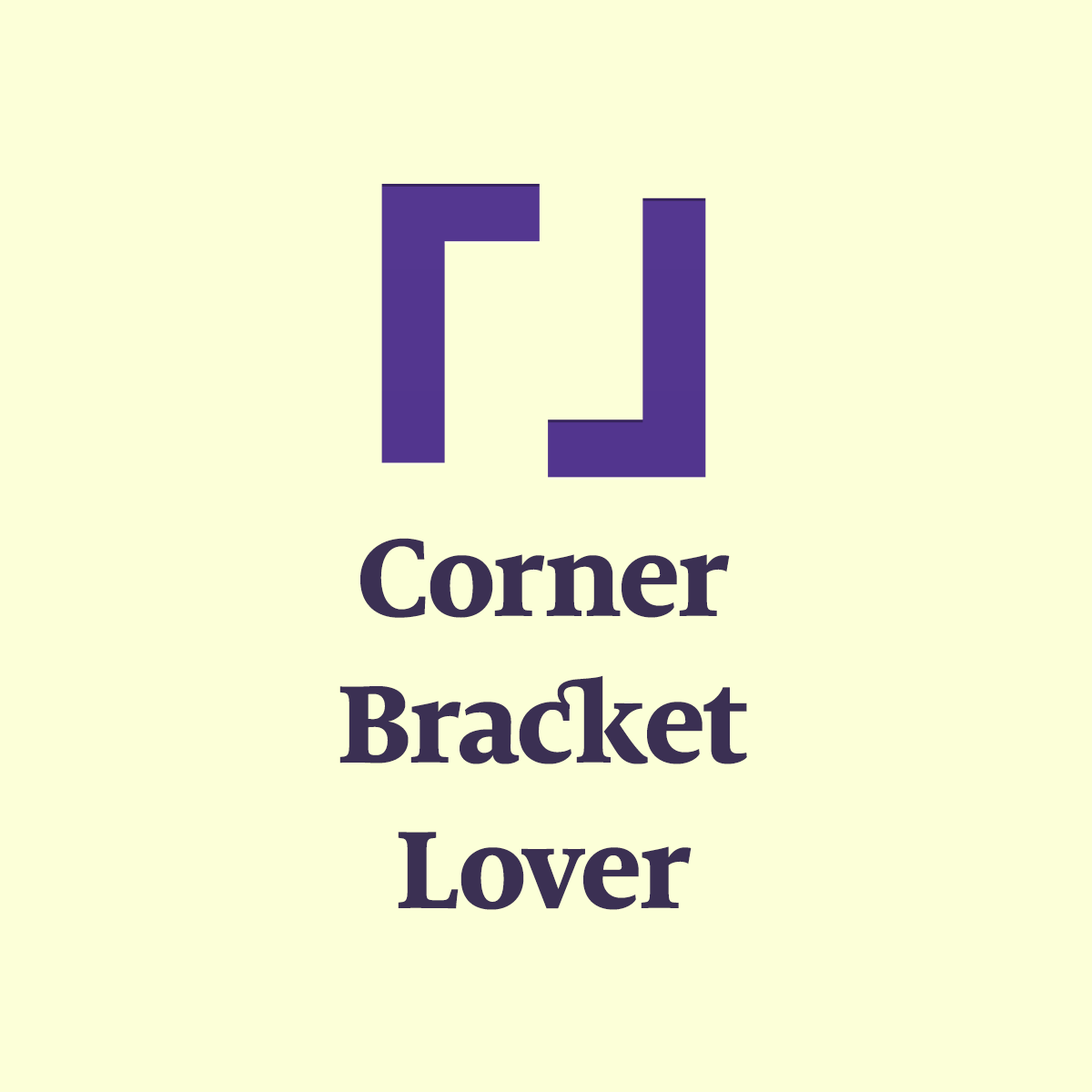
<style>
.page{position:relative;width:1092px;height:1092px;background:#fcffd8}
.page>*{position:absolute;margin:0}
.t1{font:121.7px "MiloSerifOT-Xbold";letter-spacing:-0.005em;color:#3b3053}
</style>
<div class="page">
<p class="t1" style="left:339px;top:538px;width:408px;height:372px;text-align:center">Corner<br>Bracket<br>Lover</p>
</div>
